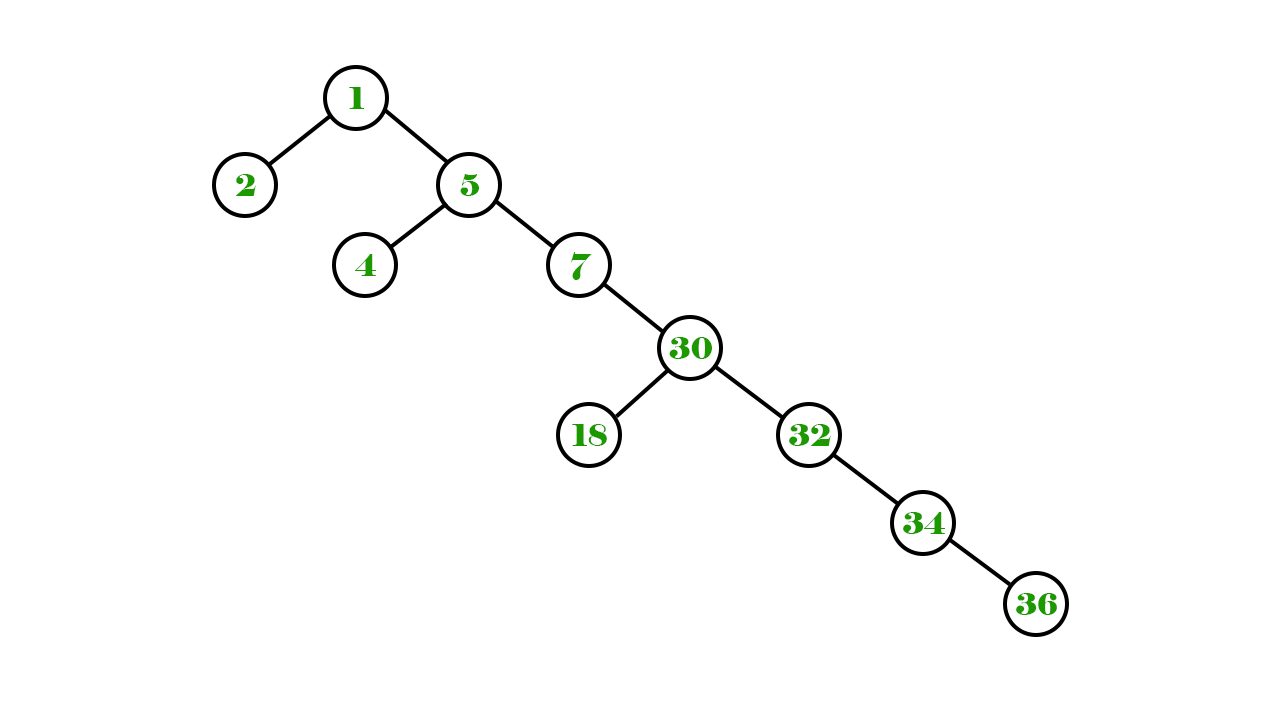
<style>
.page{position:relative;width:1280px;height:720px;background:#ffffff}
.page>*{position:absolute;margin:0}
.t1{font:30px "Elephant-Regular";color:#1d9900}
</style>
<div class="page">
<p class="t1" style="left:349px;top:87px;width:15px;height:22px">1</p>
<p class="t1" style="left:235px;top:174px;width:21px;height:22px">2</p>
<p class="t1" style="left:460px;top:174px;width:19px;height:22px">5</p>
<p class="t1" style="left:355px;top:254px;width:21px;height:22px">4</p>
<p class="t1" style="left:571px;top:252px;width:21px;height:28px">7</p>
<p class="t1" style="left:669px;top:337px;width:43px;height:22px">30</p>
<p class="t1" style="left:572px;top:424px;width:35px;height:22px">18</p>
<p class="t1" style="left:789px;top:424px;width:42px;height:22px">32</p>
<p class="t1" style="left:903px;top:512px;width:42px;height:22px">34</p>
<p class="t1" style="left:1016px;top:593px;width:41px;height:22px">36</p>
</div>
